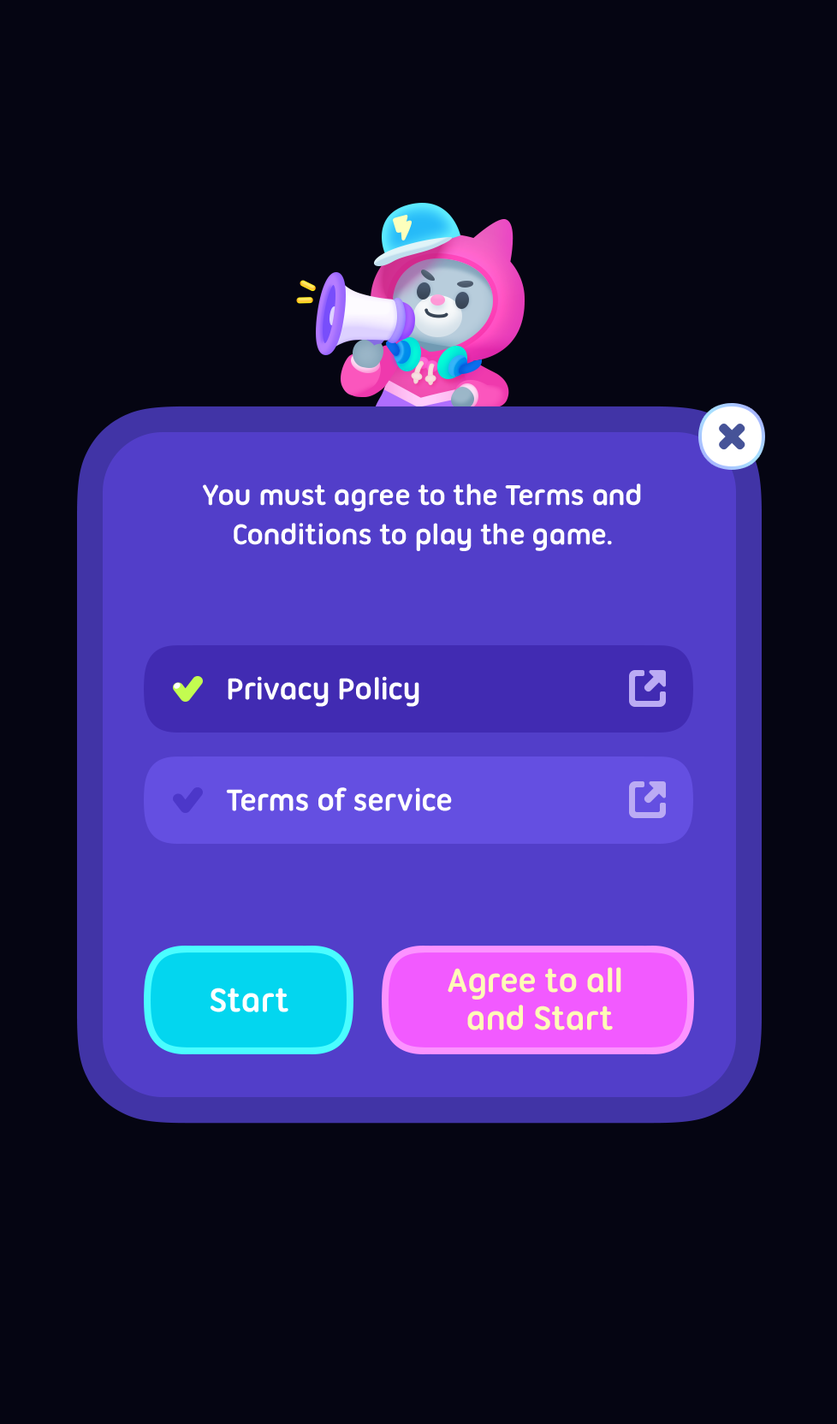
<style>
.page{position:relative;width:837px;height:1424px;background:#050512}
.page>*{position:absolute;margin:0}
.t1{font:30.8px/39.4px "UbuntuTitling-Bold";letter-spacing:-0.025em;color:#ffffff}
.t2{font:32.5px "UbuntuTitling-Bold";letter-spacing:-0.025em;color:#ffffff}
.t3{font:36px/37.7px "UbuntuTitling-Bold";letter-spacing:-0.025em;color:#fefbb7}
.t4{font:36px "UbuntuTitling-Bold";letter-spacing:-0.025em;color:#ffffff}
</style>
<div class="page">
<p class="t1" style="left:203px;top:484px;width:438px;height:67px;text-align:center">You must agree to the Terms and<br>Conditions to play the game.</p>
<p class="t2" style="left:228px;top:676px;width:191px;height:31px">Privacy Policy</p>
<p class="t2" style="left:226px;top:788px;width:226px;height:23px">Terms of service</p>
<p class="t3" style="left:448px;top:967px;width:173px;height:64px;text-align:center">Agree to all <br>and Start</p>
<p class="t4" style="left:211px;top:988px;width:77px;height:25px">Start</p>
</div>
